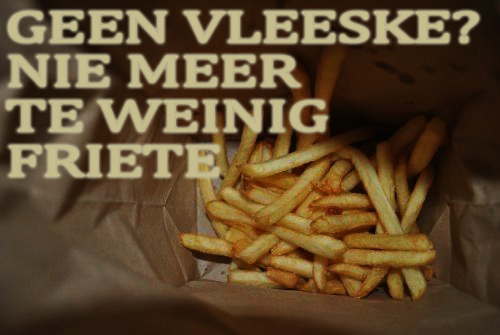
<style>
.page{position:relative;width:500px;height:335px}
.page>*{position:absolute;margin:0}
.t1{font:44.6px/44.6px "CambriaMath";letter-spacing:-0.02em;color:#c7bd8c;scale:1.56 1}
</style>
<div class="page">
<p class="t1" style="left:7px;top:12px;width:471px;height:164px">GEEN VLEESKE?<br>NIE MEER<br>TE WEINIG<br>FRIETE</p>
</div>
